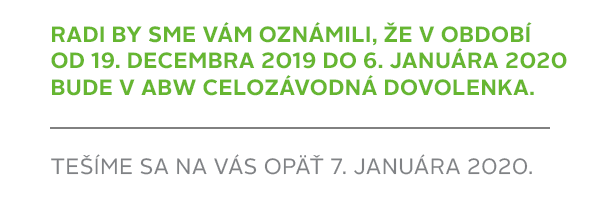
<style>
.page{position:relative;width:600px;height:200px;background:#ffffff}
.page>*{position:absolute;margin:0}
.t1{font:22px/26.5px "AlrightSans-Bold";letter-spacing:0.02em;color:#66b631;text-transform:uppercase}
.t2{font:22px/26.5px "AlrightSans-Regular";letter-spacing:0.02em;color:#808285;text-transform:uppercase}
</style>
<div class="page">
<p class="t1" style="left:51px;top:22px;width:516px;height:153px">Radi by sme Vám oznámili, že v období od 19. decembra 2019 do 6. januára 2020 bude v abw celozávodná dovolenka.<br><br><br><span class="t2">Tešíme sa na Vás opäť 7. januára 2020.</span></p>
</div>
